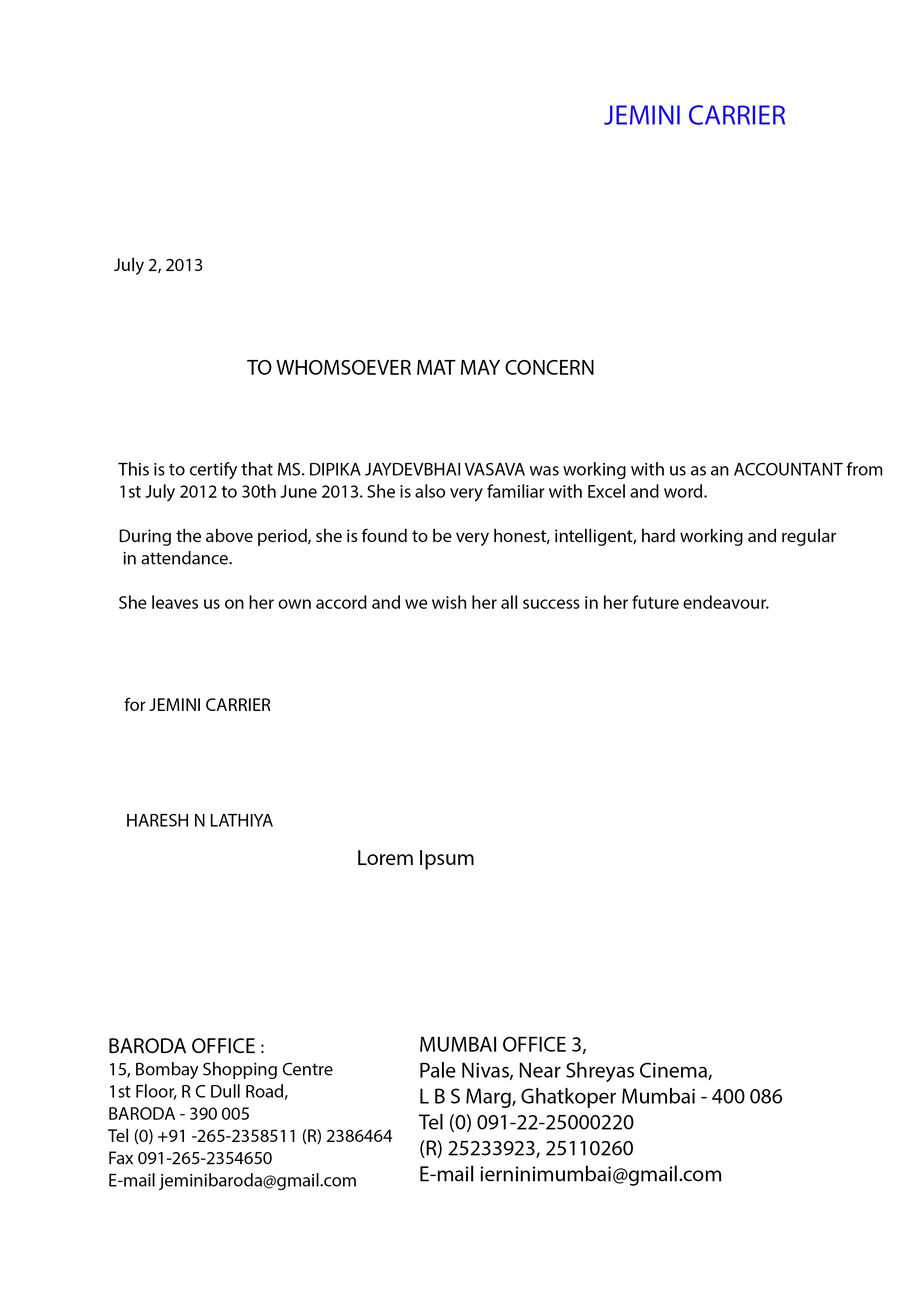
<style>
.page{position:relative;width:918px;height:1299px;background:#ffffff}
.page>*{position:absolute;margin:0}
.t1{font:27.8px "MyriadPro-Regular";color:#1b06e5}
.t2{font:18.5px "MyriadPro-Regular";color:#000000}
.t3{font:21.6px "MyriadPro-Regular";color:#000000}
</style>
<div class="page">
<p class="t1" style="left:604px;top:105px;width:182px;height:20px">JEMINI CARRIER</p>
<p class="t2" style="left:114px;top:258px;width:89px;height:17px">July 2, 2013</p>
<p class="t3" style="left:247px;top:360px;width:346px;height:15px">TO WHOMSOEVER MAT MAY CONCERN</p>
<p class="t2" style="left:118px;top:462px;width:765px;height:147px">This is to certify that MS. DIPIKA JAYDEVBHAI VASAVA was working with us as an ACCOUNTANT from<br>1st July 2012 to 30th June 2013. She is also very familiar with Excel and word. <br><br>During the above period, she is found to be very honest, intelligent, hard working and regular<br> in attendance. <br><br>She leaves us on her own accord and we wish her all success in her future endeavour.</p>
<p class="t2" style="left:124px;top:697px;width:147px;height:14px">for JEMINI CARRIER</p>
<p class="t2" style="left:127px;top:814px;width:146px;height:12px">HARESH N LATHIYA</p>
<p class="t3" style="left:358px;top:850px;width:116px;height:19px">Lorem Ipsum</p>
<p class="t3" style="left:419px;top:1037px;width:363px;height:148px">MUMBAI OFFICE 3,<br>Pale Nivas, Near Shreyas Cinema,<br>L B S Marg, Ghatkoper Mumbai - 400 086<br>Tel (0) 091-22-25000220<br>(R) 25233923, 25110260<br>E-mail ierninimumbai@gmail.com</p>
<p class="t2" style="left:108px;top:1038px;width:284px;height:152px"><span class="t3">BARODA OFFICE </span>: <br>15, Bombay Shopping Centre<br>1st Floor, R C Dull Road, <br>BARODA - 390 005 <br>Tel (0) +91 -265-2358511 (R) 2386464 <br>Fax 091-265-2354650 <br>E-mail jeminibaroda@gmail.com</p>
</div>
